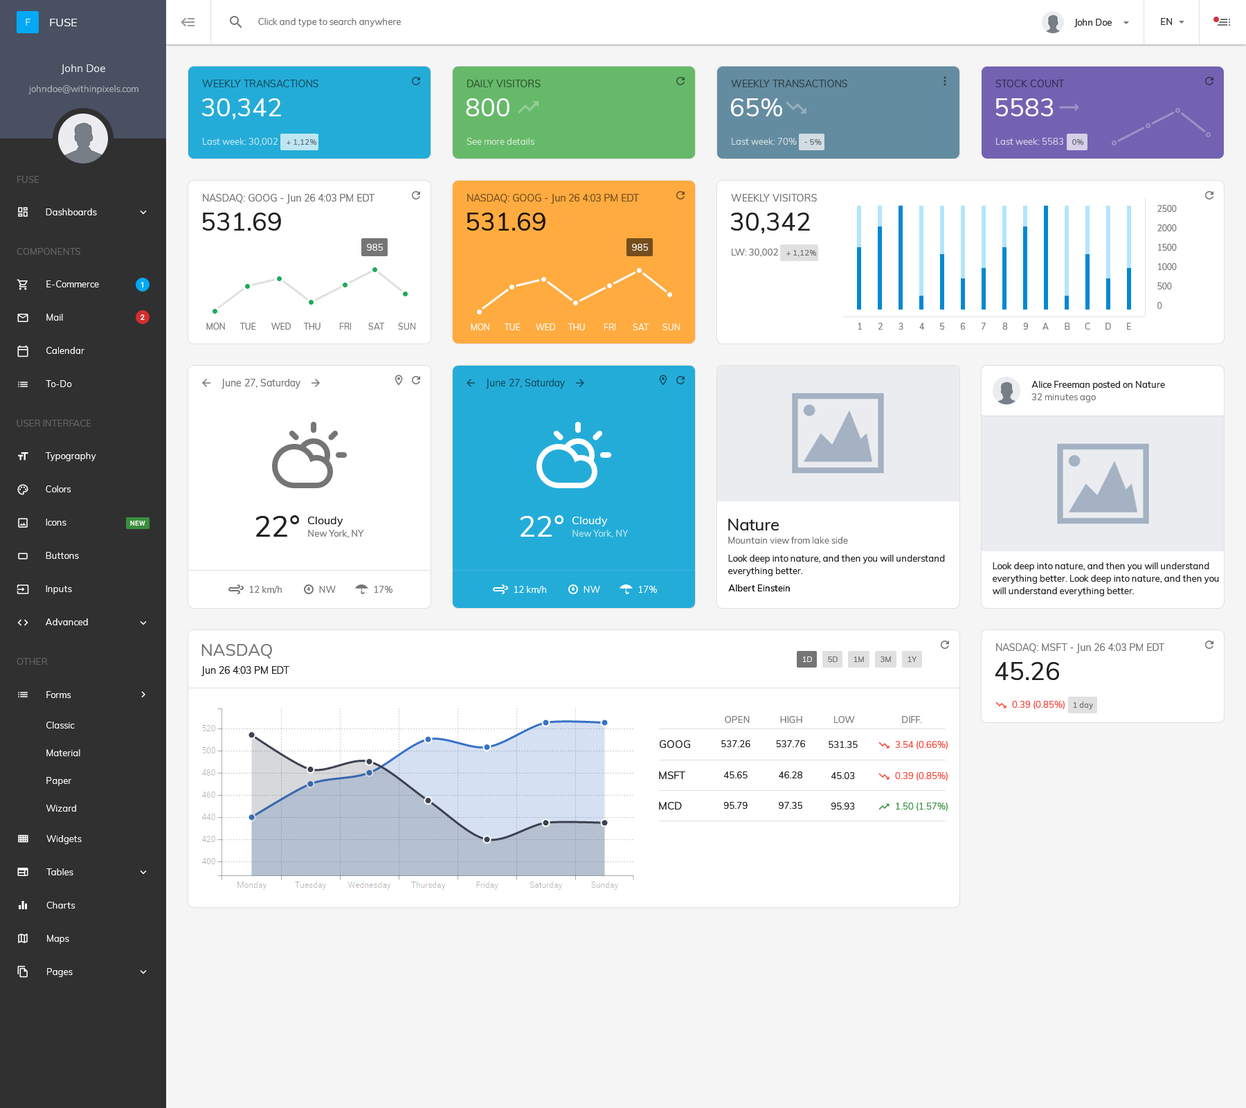
<style>
.page{position:relative;width:1246px;height:1108px;background:#ffffff}
.page>*{position:absolute;margin:0}
.t1{font:9.7px "Muli-Regular";color:#114f63}
.t2{font:9.7px "Muli-Regular";color:#2f5530}
.t3{font:9.7px "Muli-Regular";color:#2e4049}
.t4{font:9.7px "Muli-Regular";color:#352d52}
.t5{font:24.9px "Muli-Regular";color:#ffffff}
.t6{font:9px "Muli-Regular";color:#bee6f3}
.t7{font:9px "Muli-Regular";color:#d1ead2}
.t8{font:9px "Muli-Regular";color:#d1dde3}
.t9{font:9px "Muli-Regular";color:#d5d0e8}
.t10{font:7.6px "Muli-Regular";color:#576a6f}
.t11{font:7.6px "Muli-Regular";color:#606568}
.t12{font:7.6px "Muli-Regular"}
.t13{font:9.7px "Muli-Regular";color:#757575}
.t14{font:9.7px "Muli-Regular";color:#754e1d}
.t15{font:8.3px/19.4px "Muli-Regular";color:#757575}
.t16{font:24.9px "Muli-Regular";color:#212121}
.t17{font:24.9px "Muli-Regular";color:#211608}
.t18{font:9px "Muli-Regular";color:#ffffff}
.t19{font:9px "Muli-Regular";color:#757575}
.t20{font:7.6px "Muli-Regular";color:#676767}
.t21{font:8.3px "Muli-Regular";color:#757575}
.t22{font:8.3px "Muli-Regular";color:#ffffff}
.t23{font:9px "Muli-Regular";color:#212121}
.t24{font:29.1px "Muli-Regular";color:#212121}
.t25{font:11.1px "Muli-Regular";color:#212121}
.t26{font:29.1px "Muli-Regular";color:#ffffff}
.t27{font:11.1px "Muli-Regular";color:#ffffff}
.t28{font:16.6px "Muli-Regular";color:#212121}
.t29{font:9px/12.5px "Muli-Regular";color:#212121}
.t30{font:9px "Muli-Regular";color:#000000}
.t31{font:16.6px "Muli-Regular";color:#757575}
.t32{font:7.6px "Muli-Regular";color:#ffffff}
.t33{font:9.7px "Muli-Regular";color:#212121}
.t34{font:9px "Muli-Regular";color:#f44336}
.t35{font:10.4px "Muli-Regular";color:#212121}
.t36{font:9px "Muli-Regular";color:#388e3c}
</style>
<div class="page">
<p class="t1" style="left:202px;top:80px;width:116px;height:7px">WEEKLY TRANSACTIONS</p>
<p class="t2" style="left:467px;top:80px;width:74px;height:7px">DAILY VISITORS</p>
<p class="t3" style="left:731px;top:80px;width:116px;height:7px">WEEKLY TRANSACTIONS</p>
<p class="t4" style="left:996px;top:80px;width:69px;height:7px">STOCK COUNT</p>
<p class="t5" style="left:201px;top:98px;width:80px;height:22px">30,342</p>
<p class="t5" style="left:466px;top:98px;width:44px;height:18px">800</p>
<p class="t5" style="left:731px;top:98px;width:51px;height:18px">65%</p>
<p class="t5" style="left:996px;top:98px;width:57px;height:18px">5583</p>
<p class="t6" style="left:203px;top:138px;width:75px;height:8px">Last week: 30,002</p>
<p class="t7" style="left:467px;top:138px;width:67px;height:7px">See more details</p>
<p class="t8" style="left:732px;top:138px;width:65px;height:7px">Last week: 70%</p>
<p class="t9" style="left:996px;top:138px;width:67px;height:7px">Last week: 5583</p>
<p class="t10" style="left:287px;top:139px;width:29px;height:7px">+ 1,12%</p>
<p class="t11" style="left:804px;top:139px;width:18px;height:6px">- 5%</p>
<p class="t12" style="left:1072px;top:139px;width:11px;height:6px">0%</p>
<p class="t13" style="left:203px;top:194px;width:172px;height:10px">NASDAQ: GOOG - Jun 26 4:03 PM EDT</p>
<p class="t14" style="left:467px;top:194px;width:172px;height:10px">NASDAQ: GOOG - Jun 26 4:03 PM EDT</p>
<p class="t13" style="left:731px;top:194px;width:86px;height:7px">WEEKLY VISITORS</p>
<p class="t15" style="left:1158px;top:205px;width:19px;height:104px">2500<br>2000<br>1500<br>1000<br>500<br>0</p>
<p class="t16" style="left:202px;top:213px;width:79px;height:18px">531.69</p>
<p class="t17" style="left:467px;top:213px;width:79px;height:18px">531.69</p>
<p class="t16" style="left:730px;top:213px;width:80px;height:21px">30,342</p>
<p class="t18" style="left:367px;top:244px;width:16px;height:7px">985</p>
<p class="t18" style="left:632px;top:244px;width:16px;height:7px">985</p>
<p class="t19" style="left:732px;top:249px;width:46px;height:8px">LW: 30,002</p>
<p class="t20" style="left:786px;top:250px;width:30px;height:7px">+ 1,12%</p>
<p class="t21" style="left:206px;top:323px;width:19px;height:7px">MON</p>
<p class="t21" style="left:240px;top:323px;width:16px;height:7px">TUE</p>
<p class="t21" style="left:271px;top:323px;width:20px;height:7px">WED</p>
<p class="t21" style="left:303px;top:323px;width:18px;height:7px">THU</p>
<p class="t21" style="left:340px;top:323px;width:11px;height:7px">FRI</p>
<p class="t21" style="left:368px;top:323px;width:17px;height:7px">SAT</p>
<p class="t21" style="left:398px;top:323px;width:17px;height:7px">SUN</p>
<p class="t22" style="left:471px;top:323px;width:18px;height:7px">MON</p>
<p class="t22" style="left:504px;top:323px;width:17px;height:7px">TUE</p>
<p class="t22" style="left:536px;top:323px;width:19px;height:7px">WED</p>
<p class="t22" style="left:568px;top:323px;width:17px;height:7px">THU</p>
<p class="t22" style="left:604px;top:323px;width:11px;height:7px">FRI</p>
<p class="t22" style="left:633px;top:323px;width:16px;height:7px">SAT</p>
<p class="t22" style="left:663px;top:323px;width:17px;height:7px">SUN</p>
<p class="t21" style="left:858px;top:323px;width:4px;height:7px">1</p>
<p class="t21" style="left:879px;top:323px;width:4px;height:7px">2</p>
<p class="t21" style="left:899px;top:323px;width:4px;height:7px">3</p>
<p class="t21" style="left:919px;top:323px;width:5px;height:7px">4</p>
<p class="t21" style="left:940px;top:323px;width:4px;height:7px">5</p>
<p class="t21" style="left:961px;top:323px;width:4px;height:7px">6</p>
<p class="t21" style="left:982px;top:323px;width:4px;height:7px">7</p>
<p class="t21" style="left:1002px;top:323px;width:5px;height:7px">8</p>
<p class="t21" style="left:1024px;top:323px;width:4px;height:7px">9</p>
<p class="t21" style="left:1043px;top:323px;width:6px;height:7px">A</p>
<p class="t21" style="left:1065px;top:323px;width:5px;height:7px">B</p>
<p class="t21" style="left:1085px;top:323px;width:5px;height:7px">C</p>
<p class="t21" style="left:1106px;top:323px;width:5px;height:7px">D</p>
<p class="t21" style="left:1127px;top:323px;width:4px;height:7px">E</p>
<p class="t13" style="left:222px;top:379px;width:78px;height:10px">June 27, Saturday</p>
<p class="t1" style="left:486px;top:379px;width:79px;height:10px">June 27, Saturday</p>
<p class="t23" style="left:1032px;top:381px;width:133px;height:9px">Alice Freeman posted on Nature</p>
<p class="t19" style="left:1032px;top:393px;width:64px;height:9px">32 minutes ago</p>
<p class="t24" style="left:255px;top:515px;width:44px;height:22px">22°</p>
<p class="t25" style="left:308px;top:516px;width:35px;height:11px">Cloudy</p>
<p class="t26" style="left:520px;top:515px;width:44px;height:22px">22°</p>
<p class="t27" style="left:573px;top:516px;width:35px;height:11px">Cloudy</p>
<p class="t28" style="left:728px;top:519px;width:51px;height:11px">Nature</p>
<p class="t19" style="left:308px;top:530px;width:56px;height:8px">New York, NY</p>
<p class="t6" style="left:573px;top:530px;width:56px;height:8px">New York, NY</p>
<p class="t19" style="left:728px;top:537px;width:120px;height:6px">Mountain view from lake side</p>
<p class="t29" style="left:728px;top:555px;width:217px;height:21px">Look deep into nature, and then you will understand<br>everything better.</p>
<p class="t29" style="left:993px;top:562px;width:226px;height:34px">Look deep into nature, and then you will understand<br>everything better. Look deep into nature, and then you<br>will understand everything better.</p>
<p class="t19" style="left:250px;top:586px;width:32px;height:7px">12 km/h</p>
<p class="t19" style="left:319px;top:586px;width:17px;height:7px">NW</p>
<p class="t19" style="left:375px;top:586px;width:18px;height:7px">17%</p>
<p class="t18" style="left:514px;top:586px;width:32px;height:7px">12 km/h</p>
<p class="t18" style="left:584px;top:586px;width:16px;height:7px">NW</p>
<p class="t18" style="left:639px;top:586px;width:18px;height:7px">17%</p>
<p class="t30" style="left:728px;top:584px;width:62px;height:7px">Albert Einstein</p>
<p class="t31" style="left:201px;top:644px;width:71px;height:15px">NASDAQ</p>
<p class="t13" style="left:996px;top:643px;width:168px;height:11px">NASDAQ: MSFT - Jun 26 4:03 PM EDT</p>
<p class="t32" style="left:803px;top:656px;width:9px;height:6px">1D</p>
<p class="t20" style="left:828px;top:656px;width:10px;height:6px">5D</p>
<p class="t20" style="left:854px;top:656px;width:10px;height:6px">1M</p>
<p class="t20" style="left:881px;top:656px;width:10px;height:6px">3M</p>
<p class="t20" style="left:908px;top:656px;width:9px;height:6px">1Y</p>
<p class="t16" style="left:995px;top:662px;width:64px;height:18px">45.26</p>
<p class="t33" style="left:201px;top:666px;width:88px;height:10px">Jun 26 4:03 PM EDT</p>
<p class="t34" style="left:1012px;top:701px;width:53px;height:8px">0.39 (0.85%)</p>
<p class="t20" style="left:1074px;top:701px;width:19px;height:9px">1 day</p>
<p class="t19" style="left:725px;top:716px;width:25px;height:7px">OPEN</p>
<p class="t19" style="left:780px;top:716px;width:22px;height:7px">HIGH</p>
<p class="t19" style="left:834px;top:716px;width:21px;height:7px">LOW</p>
<p class="t19" style="left:902px;top:716px;width:20px;height:7px">DIFF.</p>
<p class="t35" style="left:660px;top:740px;width:30px;height:8px">GOOG</p>
<p class="t23" style="left:721px;top:740px;width:29px;height:7px">537.26</p>
<p class="t23" style="left:776px;top:740px;width:29px;height:7px">537.76</p>
<p class="t23" style="left:829px;top:741px;width:29px;height:7px">531.35</p>
<p class="t34" style="left:895px;top:741px;width:53px;height:8px">3.54 (0.66%)</p>
<p class="t35" style="left:659px;top:771px;width:26px;height:8px">MSFT</p>
<p class="t23" style="left:724px;top:771px;width:24px;height:7px">45.65</p>
<p class="t23" style="left:779px;top:771px;width:23px;height:7px">46.28</p>
<p class="t23" style="left:831px;top:772px;width:24px;height:7px">45.03</p>
<p class="t34" style="left:895px;top:772px;width:53px;height:8px">0.39 (0.85%)</p>
<p class="t35" style="left:659px;top:802px;width:23px;height:7px">MCD</p>
<p class="t23" style="left:724px;top:802px;width:24px;height:7px">95.79</p>
<p class="t23" style="left:779px;top:802px;width:23px;height:7px">97.35</p>
<p class="t23" style="left:831px;top:802px;width:24px;height:7px">95.93</p>
<p class="t36" style="left:896px;top:802px;width:52px;height:9px">1.50 (1.57%)</p>
</div>
